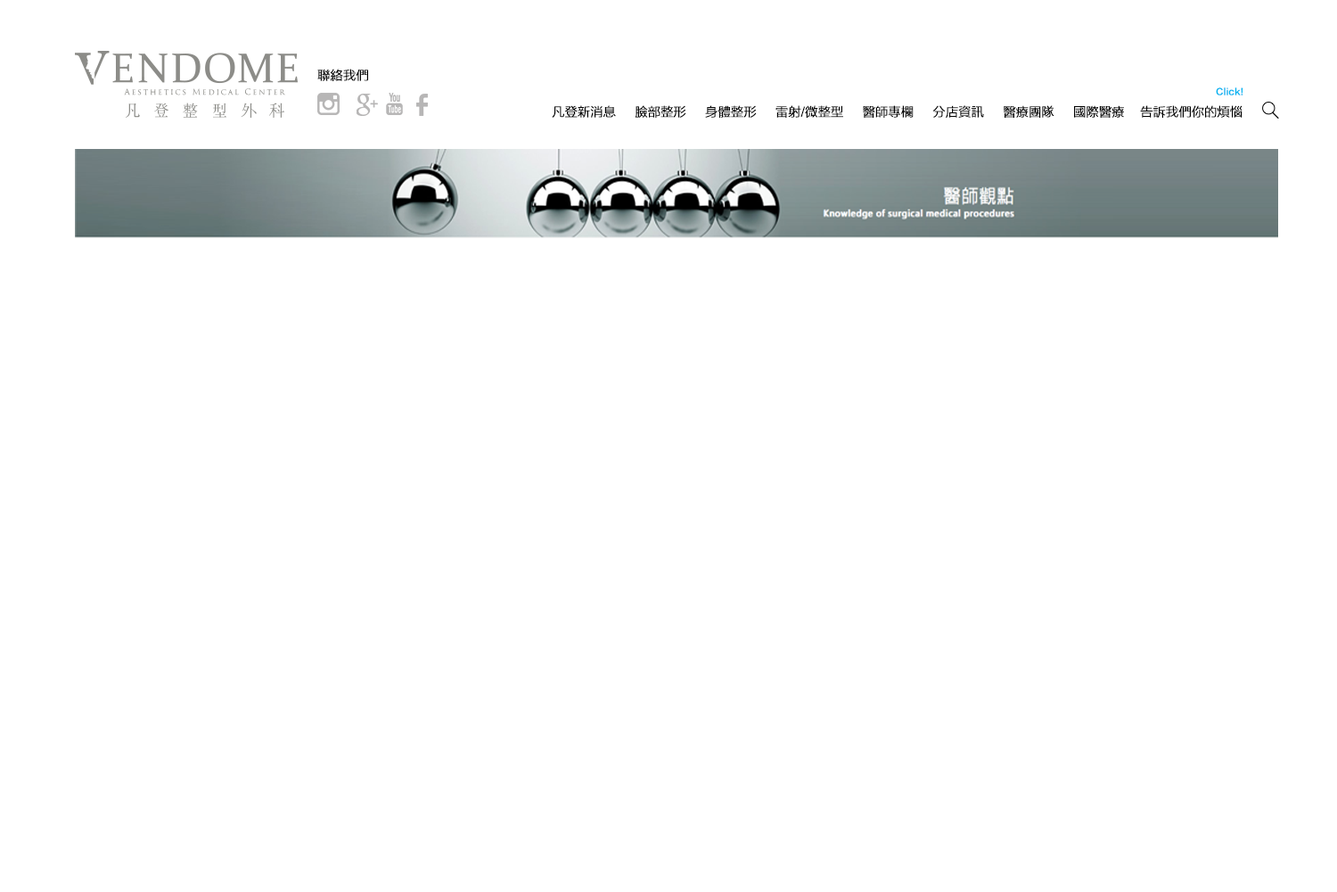
<style>
.page{position:relative;width:1337px;height:892px;background:#ffffff}
.page>*{position:absolute;margin:0}
.t1{font:12.5px "FZLTXHB--B51-0";color:#000000;font-weight:bold}
.t2{font:8.9px "FZLTZHB--B51-0";color:#00b5f1;font-weight:bold}
</style>
<div class="page">
<p class="t1" style="left:317px;top:69px;width:51px;height:12px">聯絡我們</p>
<p class="t2" style="left:1216px;top:87px;width:28px;height:8px">Click!</p>
<p class="t1" style="left:552px;top:105px;width:572px;height:13px">凡登新消息     臉部整形     身體整形     雷射/微整型     醫師專欄     分店資訊     醫療團隊     國際醫療</p>
<p class="t1" style="left:1140px;top:105px;width:103px;height:13px">告訴我們你的煩惱</p>
</div>
